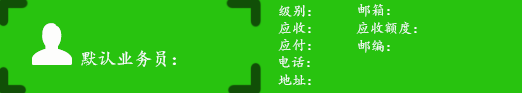
<style>
.page{position:relative;width:522px;height:93px;background:#28c30f}
.page>*{position:absolute;margin:0}
.t1{font:14px "¿¬Ìå";color:#fcfdfc}
.t2{font:18px "¿¬Ìå";color:#fcfdfc}
</style>
<div class="page">
<p class="t1" style="left:279px;top:5px;width:32px;height:12px">级别：</p>
<p class="t1" style="left:358px;top:4px;width:32px;height:13px">邮箱：</p>
<p class="t1" style="left:278px;top:22px;width:33px;height:12px">应收：</p>
<p class="t1" style="left:356px;top:21px;width:61px;height:13px">应收额度：</p>
<p class="t1" style="left:278px;top:39px;width:33px;height:12px">应付：</p>
<p class="t1" style="left:358px;top:40px;width:32px;height:13px">邮编：</p>
<p class="t2" style="left:81px;top:50px;width:95px;height:17px">默认业务员：</p>
<p class="t1" style="left:279px;top:56px;width:31px;height:12px">电话：</p>
<p class="t1" style="left:278px;top:74px;width:33px;height:11px">地址：</p>
</div>
